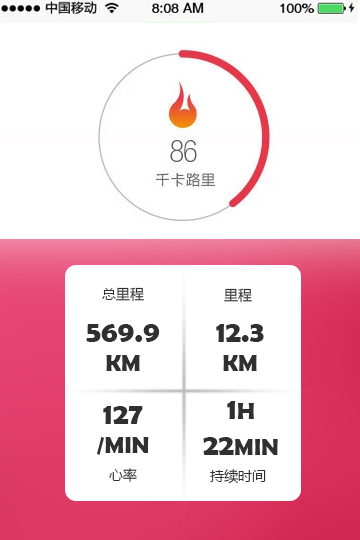
<style>
.page{position:relative;width:360px;height:540px;background:#ffffff}
.page>*{position:absolute;margin:0}
.t1{font:14px "MicrosoftYaHei";color:#303030}
.t2{font:30px "BerlinSansFBDemi-Bold";color:#303030}
.t3{font:24px "BerlinSansFBDemi-Bold";color:#303030}
</style>
<div class="page">
<p class="t1" style="left:102px;top:287px;width:42px;height:15px">总里程</p>
<p class="t1" style="left:224px;top:288px;width:28px;height:15px">里程</p>
<p class="t2" style="left:86px;top:324px;width:74px;height:47px;text-align:center">569.9<br><span class="t3">KM</span></p>
<p class="t2" style="left:216px;top:324px;width:48px;height:47px;text-align:center">12.3<br><span class="t3">KM</span></p>
<p class="t3" style="left:203px;top:401px;width:75px;height:54px;text-align:center"><span class="t2">1</span>H<br><span class="t2">22</span>MIN</p>
<p class="t3" style="left:97px;top:406px;width:52px;height:49px;text-align:center"><span class="t2">127<br></span>/MIN</p>
<p class="t1" style="left:109px;top:468px;width:28px;height:14px">心率</p>
<p class="t1" style="left:210px;top:469px;width:56px;height:15px">持续时间</p>
</div>
